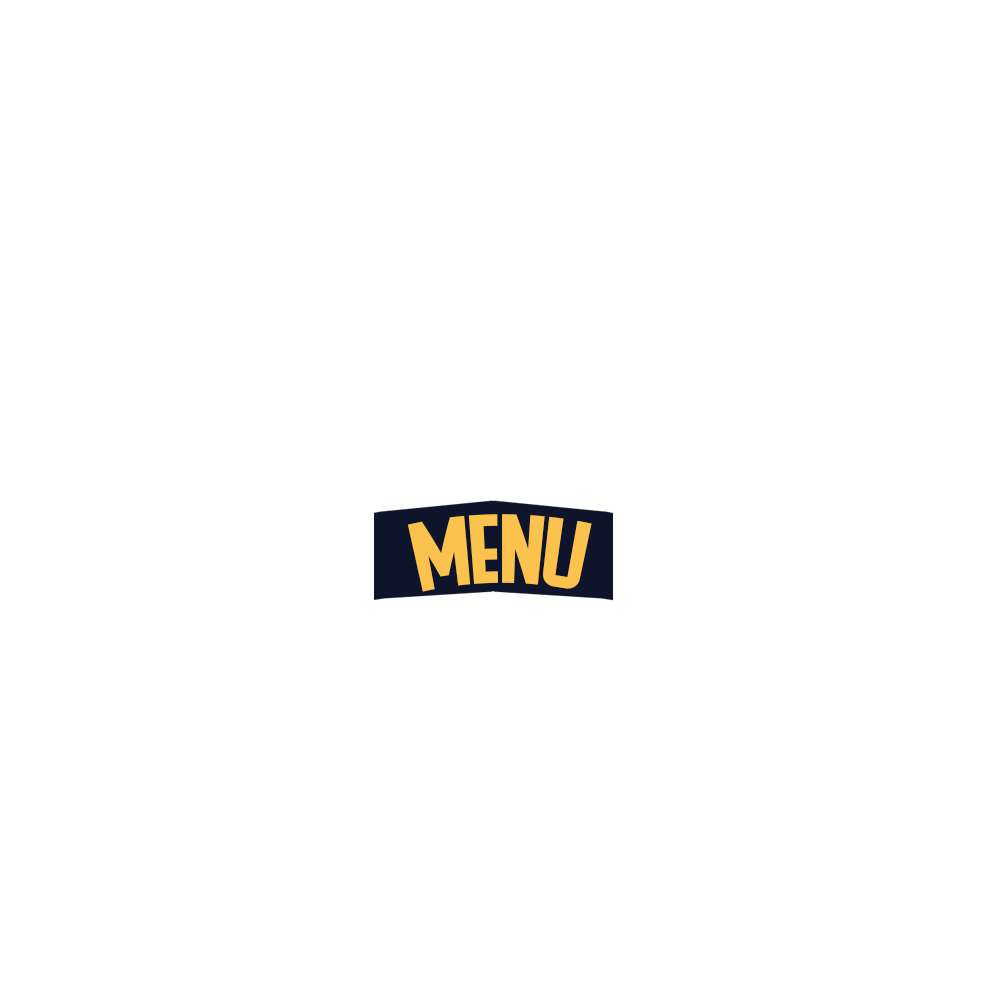
<style>
.page{position:relative;width:1000px;height:1000px;background:#ffffff}
.page>*{position:absolute;margin:0}
.t1{font:78.3px "ZAPPATBlack";color:#fbc34e}
</style>
<div class="page">
<p class="t1" style="left:407px;top:514px;width:185px;height:78px">menu</p>
</div>
